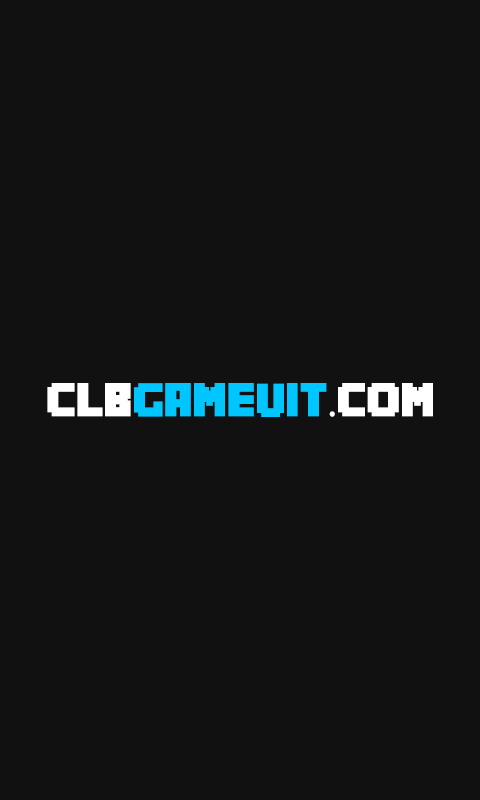
<style>
.page{position:relative;width:480px;height:800px;background:#111111}
.page>*{position:absolute;margin:0}
.t1{font:42.5px "Minecrafter";color:#00c6ff}
.t2{font:42.5px "Minecrafter";color:#ffffff}
.t3{font:42.5px "MyriadPro-Regular";color:#ffffff}
</style>
<div class="page">
<p class="t1" style="left:47px;top:383px;width:386px;height:34px"><span class="t2">CLB</span>GAMEUIT<span class="t3">.</span><span class="t2">COM</span></p>
</div>
